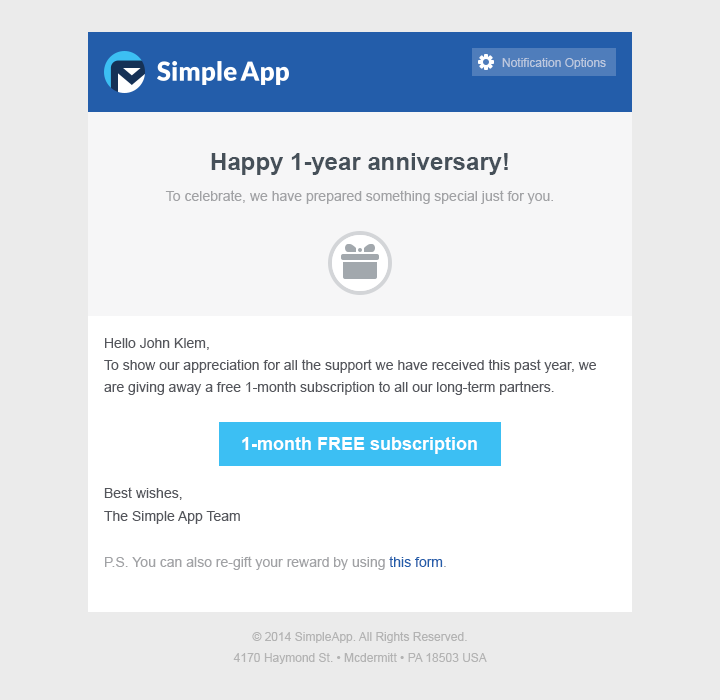
<style>
.page{position:relative;width:720px;height:700px;background:#ebebeb}
.page>*{position:absolute;margin:0}
.t1{font:12px "ArialMT";color:#bcc8df}
.t2{font:24px "Arial-BoldMT";color:#465059}
.t3{font:14px "ArialMT";color:#a1a2a5}
.t4{font:14px/22px "ArialMT";color:#54565c}
.t5{font:18px "Arial-BoldMT";color:#ffffff}
.t6{font:14px/22px "ArialMT";color:#a1a2a5}
.t7{font:14px/22px "ArialMT";color:#235daa}
.t8{font:14px/22px "ArialMT";color:#999da8}
.t9{font:12px/21px "ArialMT";color:#b3b3b3}
</style>
<div class="page">
<p class="t1" style="left:502px;top:58px;width:104px;height:11px">Notification Options</p>
<p class="t2" style="left:211px;top:153px;width:297px;height:22px">Happy 1-year anniversary!</p>
<p class="t3" style="left:165px;top:190px;width:388px;height:14px">To celebrate, we have prepared something special just for you.</p>
<p class="t4" style="left:104px;top:338px;width:492px;height:57px">Hello John Klem,<br>To show our appreciation for all the support we have received this past year, we are giving away a free 1-month subscription to all our long-term partners.</p>
<p class="t5" style="left:242px;top:437px;width:235px;height:17px">1-month FREE subscription</p>
<p class="t6" style="left:104px;top:487px;width:342px;height:83px"><span class="t4">Best wishes, <br>The Simple App Team<br><br></span>P.S. You can also re-gift your reward by using <span class="t7">this form</span><span class="t8">.</span></p>
<p class="t9" style="left:233px;top:632px;width:254px;height:32px;text-align:center">© 2014 SimpleApp. All Rights Reserved.<br>4170 Haymond St. • Mcdermitt • PA 18503 USA</p>
</div>
